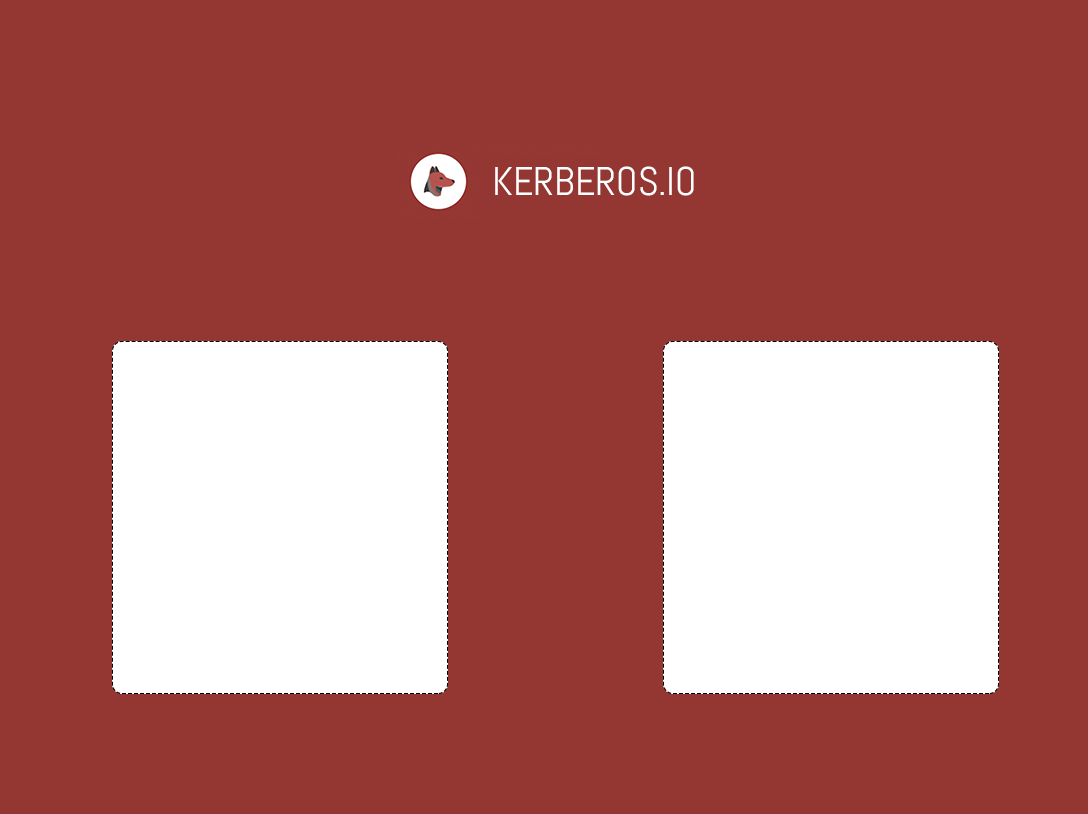
<style>
.page{position:relative;width:1088px;height:814px;background:#943733}
.page>*{position:absolute;margin:0}
.t1{font:40px "Abel-Regular";color:#ffffff}
</style>
<div class="page">
<p class="t1" style="left:495px;top:166px;width:199px;height:30px">KERBEROS.IO</p>
</div>
